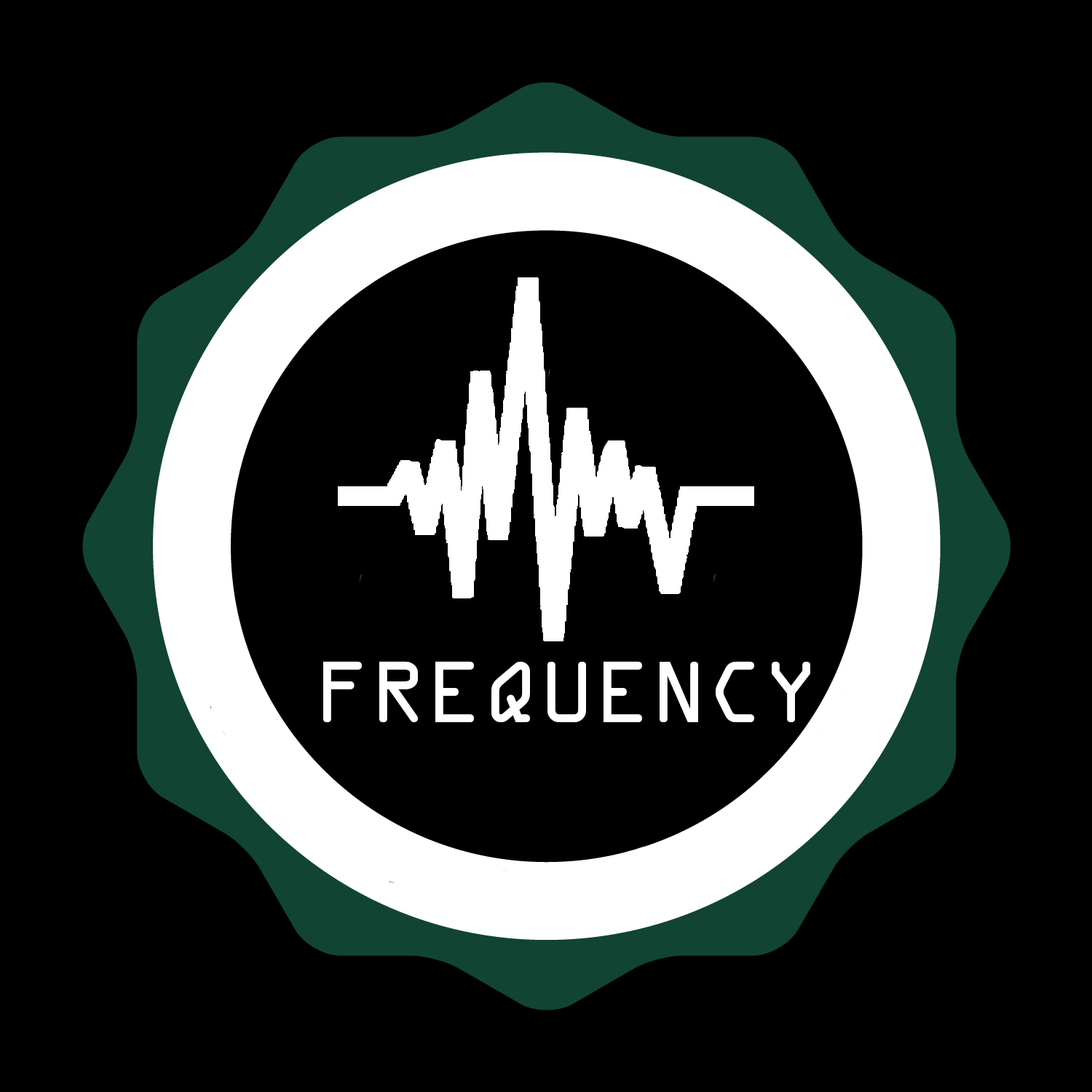
<style>
.page{position:relative;width:1092px;height:1092px;background:#000000}
.page>*{position:absolute;margin:0}
.t1{font:77.9px "OCRAStd";color:#ffffff}
</style>
<div class="page">
<p class="t1" style="left:323px;top:661px;width:487px;height:61px">FREQUENCY</p>
</div>
